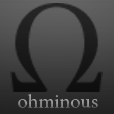
<style>
.page{position:relative;width:114px;height:114px}
.page>*{position:absolute;margin:0}
.t1{font:20px "MinionPro-Regular";letter-spacing:-0.01em}
</style>
<div class="page">
<p class="t1" style="left:18px;top:94px;width:80px;height:14px">ohminous</p>
</div>
